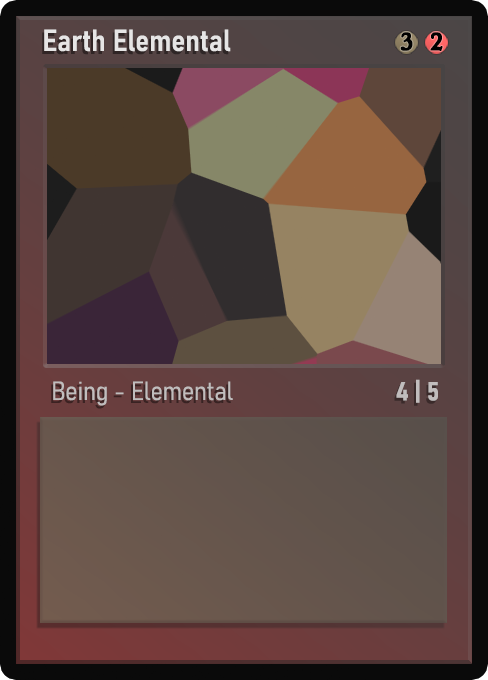
<style>
.page{position:relative;width:488px;height:680px}
.page>*{position:absolute;margin:0}
.t1{font:30px "Bahnschrift-SemiBoldSemiCondensed";color:#f2f2f2;font-weight:bold}
.t2{font:25px "WTRRoycroft";color:#000000;font-weight:bold;scale:1.09 1}
.t3{font:26px "Bahnschrift-LightSemiCondensed";color:#c8c8c8;font-weight:bold}
.t4{font:26px "Bahnschrift-BoldSemiCondensed";color:#c1bdbd;font-weight:bold}
</style>
<div class="page">
<p class="t1" style="left:44px;top:29px;width:187px;height:23px;opacity:0.9">Earth Elemental</p>
<p class="t2" style="left:400px;top:32px;width:13px;height:19px">3</p>
<p class="t2" style="left:430px;top:32px;width:13px;height:19px">2</p>
<p class="t3" style="left:53px;top:381px;width:180px;height:25px;opacity:0.9">Being - Elemental</p>
<p class="t4" style="left:396px;top:379px;width:42px;height:24px">4 | 5</p>
</div>
